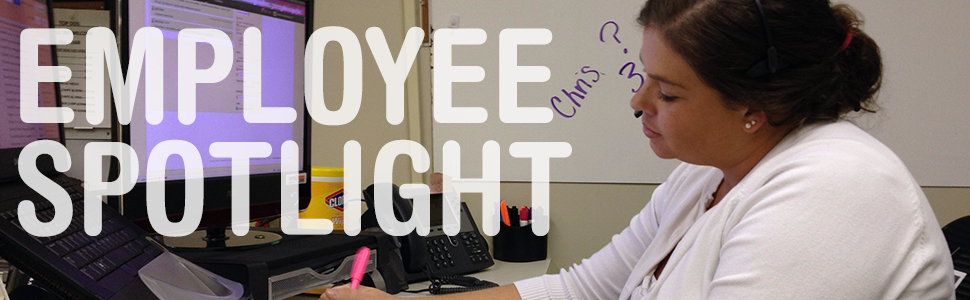
<style>
.page{position:relative;width:970px;height:300px}
.page>*{position:absolute;margin:0}
.t1{font:131px "HelveticaRoundedLTStd-BdCn";color:#edeaed}
.t2{font:128.1px "HelveticaRoundedLTStd-BdCn";color:#e2dfdd}
</style>
<div class="page">
<p class="t1" style="left:20px;top:26px;width:534px;height:100px">EMPLOYEE</p>
<p class="t2" style="left:17px;top:139px;width:555px;height:98px">SPOTLIGHT</p>
</div>
